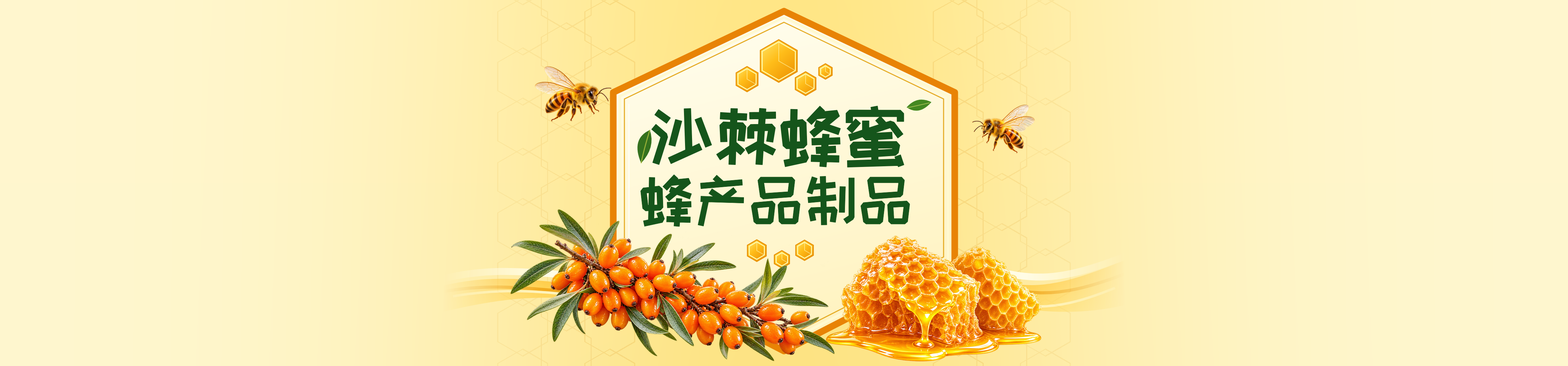
<style>
.page{position:relative;width:1568px;height:366px}
.page>*{position:absolute;margin:0}
.t1{font:70px "ZCOOLKuaiLe-Regular";color:#15551b}
.t2{font:59.6px "ZCOOLKuaiLe-Regular";color:#15551b}
</style>
<div class="page">
<p class="t1" style="left:651px;top:106px;width:253px;height:62px">沙棘蜂蜜</p>
<p class="t2" style="left:640px;top:174px;width:270px;height:53px">蜂产品制品</p>
</div>
